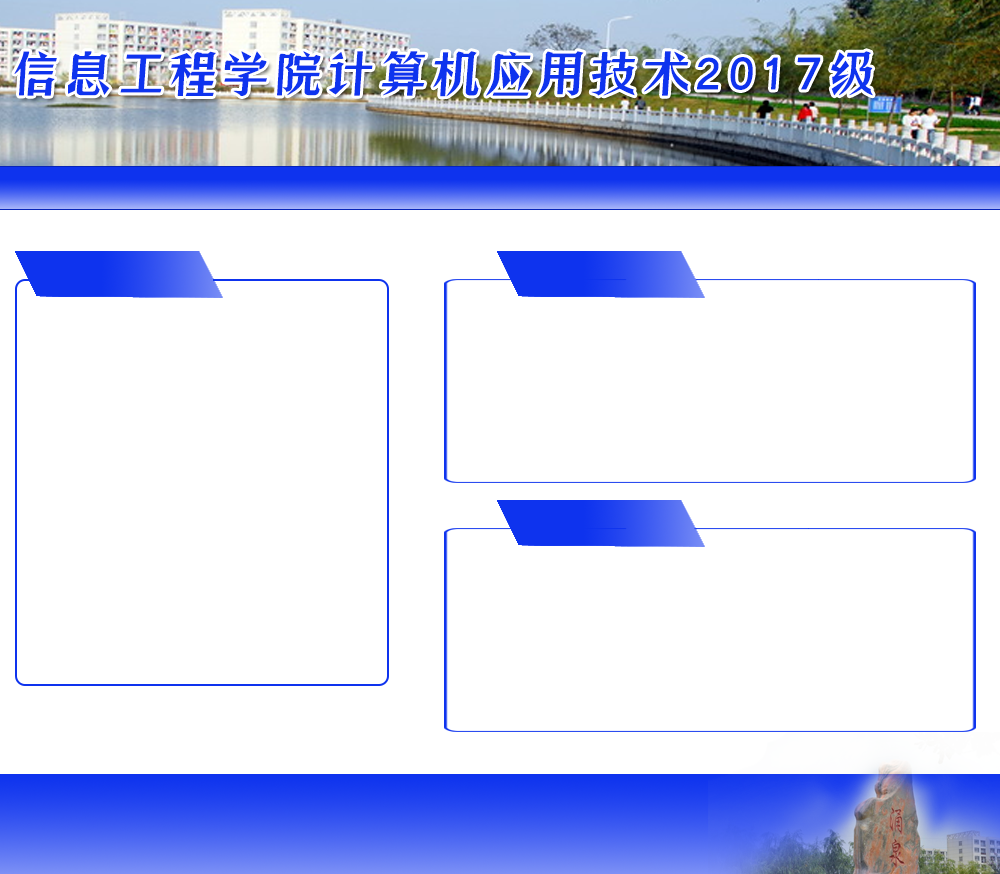
<style>
.page{position:relative;width:1000px;height:874px;background:#ffffff}
.page>*{position:absolute;margin:0}
.t1{font:44.6px "ZoomlaShuaisongA028";letter-spacing:0.15em;color:#0e33ee;font-weight:bold}
</style>
<div class="page">
<p class="t1" style="left:14px;top:51px;width:859px;height:46px">信息工程学院计算机应用技术2017级</p>
</div>
